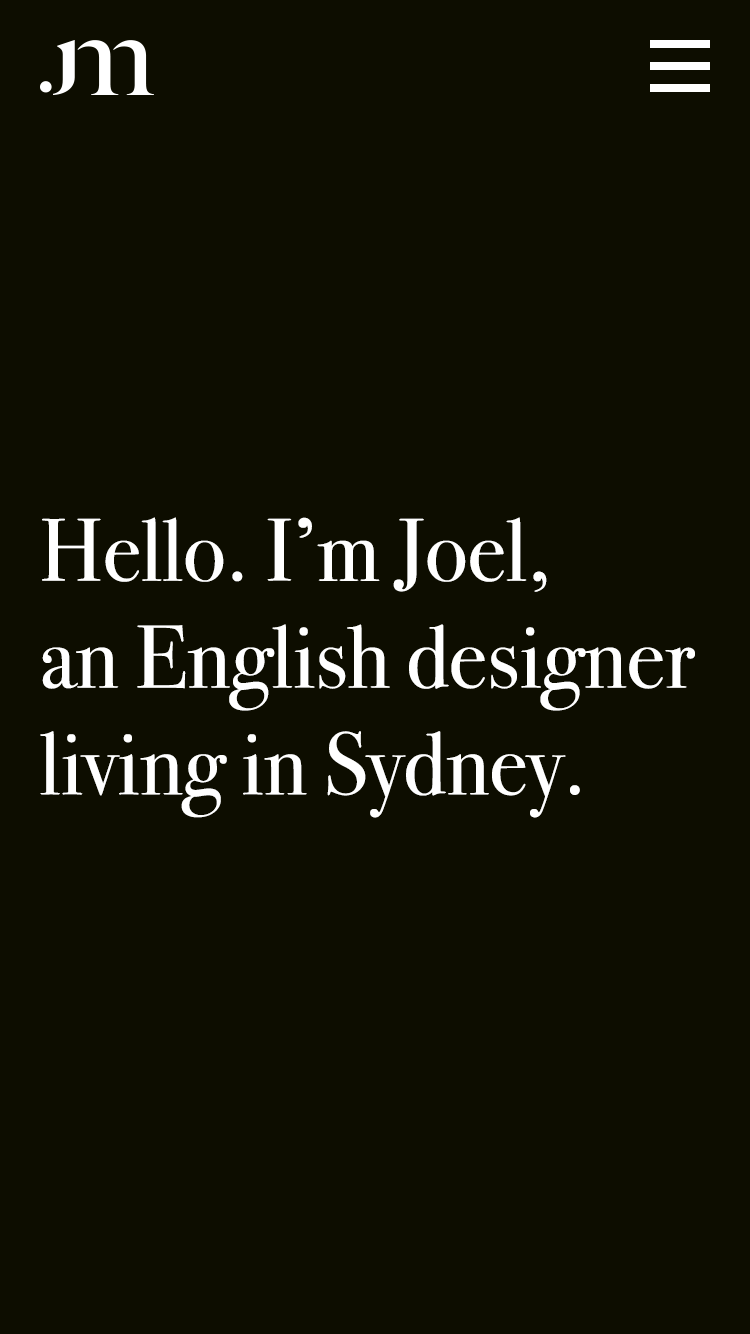
<style>
.page{position:relative;width:750px;height:1334px;background:#0d0d00}
.page>*{position:absolute;margin:0}
.t1{font:89px "BodoniSvtyTwoITCTT-Book";color:#ffffff}
</style>
<div class="page">
<p class="t1" style="left:40px;top:517px;width:655px;height:301px">Hello. I’m Joel, <br>an English designer <br>living in Sydney.</p>
</div>
